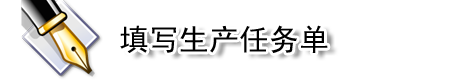
<style>
.page{position:relative;width:450px;height:80px;background:#ffffff}
.page>*{position:absolute;margin:0}
.t1{font:30px "SimHei";color:#000000}
</style>
<div class="page">
<p class="t1" style="left:120px;top:25px;width:208px;height:28px">填写生产任务单</p>
</div>
